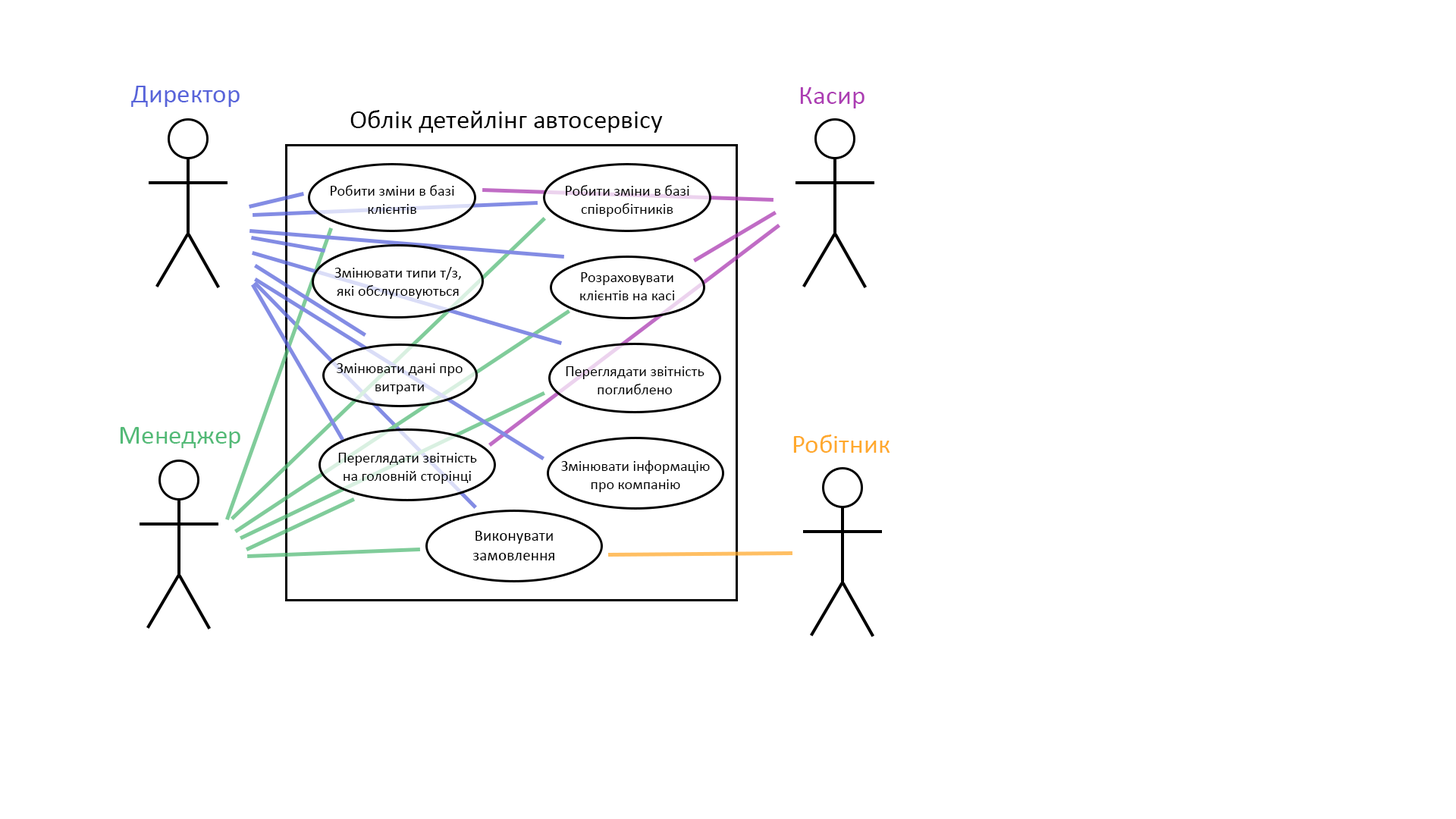
<style>
.page{position:relative;width:1456px;height:819px;background:#ffffff}
.page>*{position:absolute;margin:0}
.t1{font:26.5px "Calibri";color:#5864da}
.t2{font:26.5px "Calibri";color:#ac3cb3}
.t3{font:26.5px "Calibri";color:#000000}
.t4{font:15.2px "Calibri";color:#000000}
.t5{font:26.5px "Calibri";color:#53ba77}
.t6{font:26.5px "Calibri";color:#ffa92d}
.t7{font:16.2px "Calibri";color:#000000}
</style>
<div class="page">
<p class="t1" style="left:131px;top:86px;width:109px;height:21px">Директор</p>
<p class="t2" style="left:800px;top:87px;width:64px;height:21px">Касир</p>
<p class="t3" style="left:350px;top:110px;width:313px;height:23px">Облік детейлінг автосервісу</p>
<p class="t4" style="left:331px;top:185px;width:123px;height:29px;text-align:center">Робити зміни в базі клієнтів</p>
<p class="t4" style="left:566px;top:185px;width:123px;height:32px;text-align:center">Робити зміни в базі співробітників</p>
<p class="t4" style="left:334px;top:267px;width:127px;height:32px;text-align:center">Змінювати типи т/з, які обслуговуються</p>
<p class="t4" style="left:580px;top:272px;width:94px;height:28px;text-align:center">Розраховувати клієнтів на касі</p>
<p class="t4" style="left:337px;top:363px;width:126px;height:31px;text-align:center">Змінювати дані про витрати</p>
<p class="t4" style="left:566px;top:366px;width:138px;height:28px;text-align:center">Переглядати звітність поглиблено</p>
<p class="t5" style="left:120px;top:427px;width:120px;height:21px">Менеджер</p>
<p class="t6" style="left:793px;top:435px;width:97px;height:18px">Робітник</p>
<p class="t4" style="left:338px;top:453px;width:139px;height:31px;text-align:center">Переглядати звітність на головній сторінці</p>
<p class="t4" style="left:561px;top:460px;width:149px;height:32px;text-align:center">Змінювати інформацію про компанію</p>
<p class="t7" style="left:472px;top:531px;width:82px;height:29px;text-align:center">Виконувати<br>замовлення</p>
</div>
